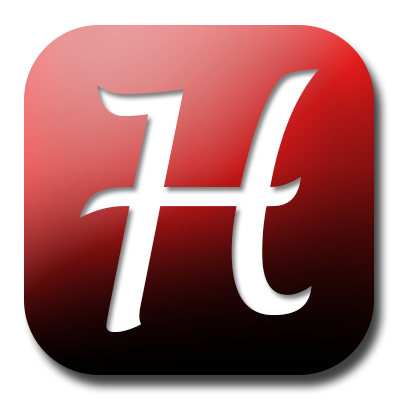
<style>
.page{position:relative;width:400px;height:400px;background:#ffffff}
.page>*{position:absolute;margin:0}
.t1{font:298.6px "LucidaHandwriting-Italic";color:#ffffff}
</style>
<div class="page">
<p class="t1" style="left:79px;top:69px;width:240px;height:263px">H</p>
</div>
